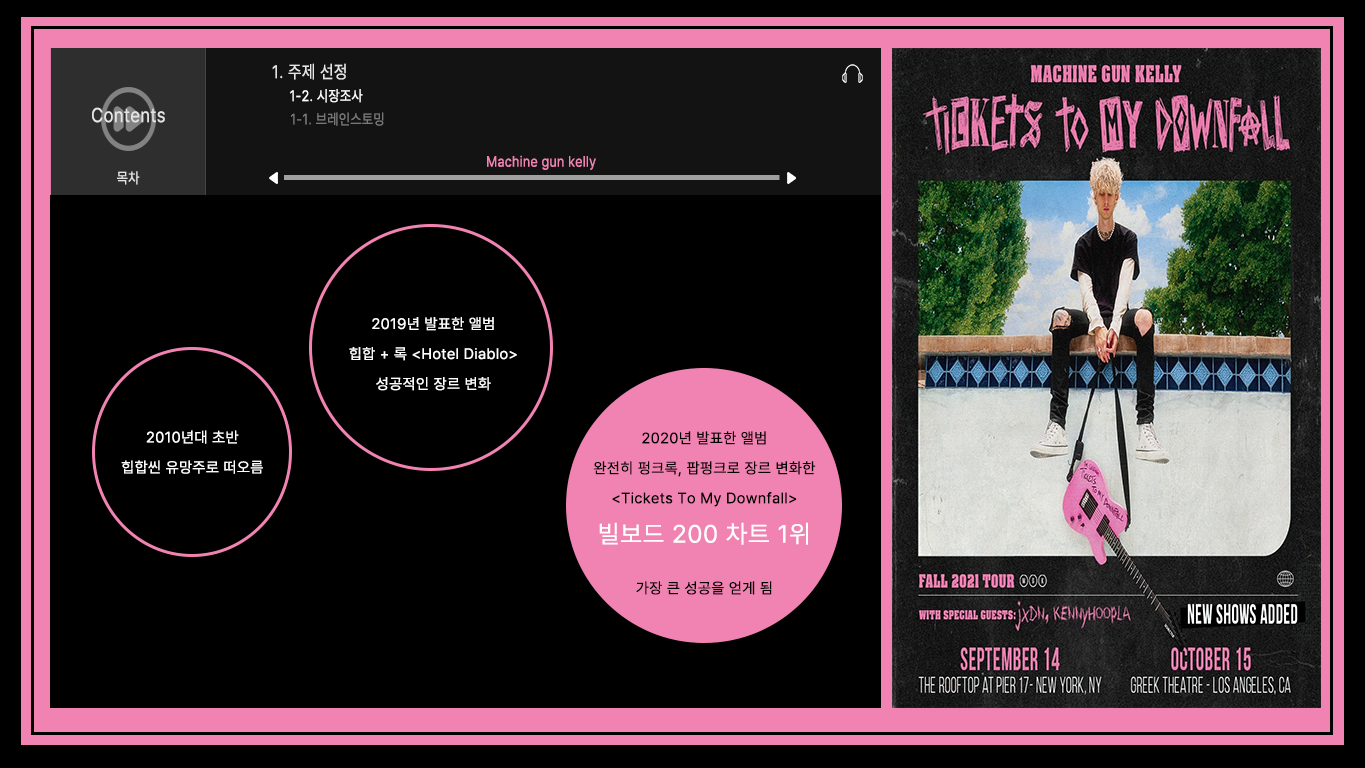
<style>
.page{position:relative;width:1365px;height:768px;background:#000000}
.page>*{position:absolute;margin:0}
.t1{font:18px "Pretendard-Regular";letter-spacing:0.03em;color:#e5e5e5;scale:0.86 1}
.t2{font:15px "Pretendard-Regular";letter-spacing:0.03em;color:#ffffff;scale:0.86 1}
.t3{font:20px "Pretendard-Regular";letter-spacing:0.03em;color:#e5e5e5;scale:0.86 1}
.t4{font:15px "Pretendard-Regular";letter-spacing:0.03em;color:#787878;scale:0.86 1}
.t5{font:15px "Pretendard-Regular";letter-spacing:0.03em;color:#f183b2;scale:0.86 1}
.t6{font:15px "Pretendard-Regular";letter-spacing:0.03em;color:#e5e5e5;scale:0.86 1}
.t7{font:15px/30px "Pretendard-Regular";letter-spacing:0.03em;color:#ffffff}
.t8{font:15px/30px "Pretendard-Regular";letter-spacing:0.03em;color:#000000}
.t9{font:25px/30px "Pretendard-Regular";letter-spacing:0.03em;color:#ffffff}
</style>
<div class="page">
<p class="t1" style="left:272px;top:63px;width:74px;height:17px">1. 주제 선정</p>
<p class="t2" style="left:290px;top:89px;width:73px;height:14px">1-2. 시장조사</p>
<p class="t3" style="left:92px;top:107px;width:73px;height:16px">Contents</p>
<p class="t4" style="left:291px;top:112px;width:93px;height:14px">1-1. 브레인스토밍</p>
<p class="t5" style="left:487px;top:155px;width:109px;height:15px">Machine gun kelly</p>
<p class="t6" style="left:117px;top:171px;width:23px;height:14px">목차</p>
<p class="t7" style="left:349px;top:317px;width:168px;height:74px;text-align:center">2019년 발표한 앨범<br>힙합 + 록 &lt;Hotel Diablo&gt;<br>성공적인 장르 변화</p>
<p class="t7" style="left:121px;top:430px;width:142px;height:44px;text-align:center">2010년대 초반<br>힙합씬 유망주로 떠오름</p>
<p class="t8" style="left:593px;top:431px;width:223px;height:164px;text-align:center">2020년 발표한 앨범<br>완전히 펑크록, 팝펑크로 장르 변화한<br>&lt;Tickets To My Downfall&gt;<br><span class="t9">빌보드 200 차트 1위<br><br></span>가장 큰 성공을 얻게 됨</p>
</div>
